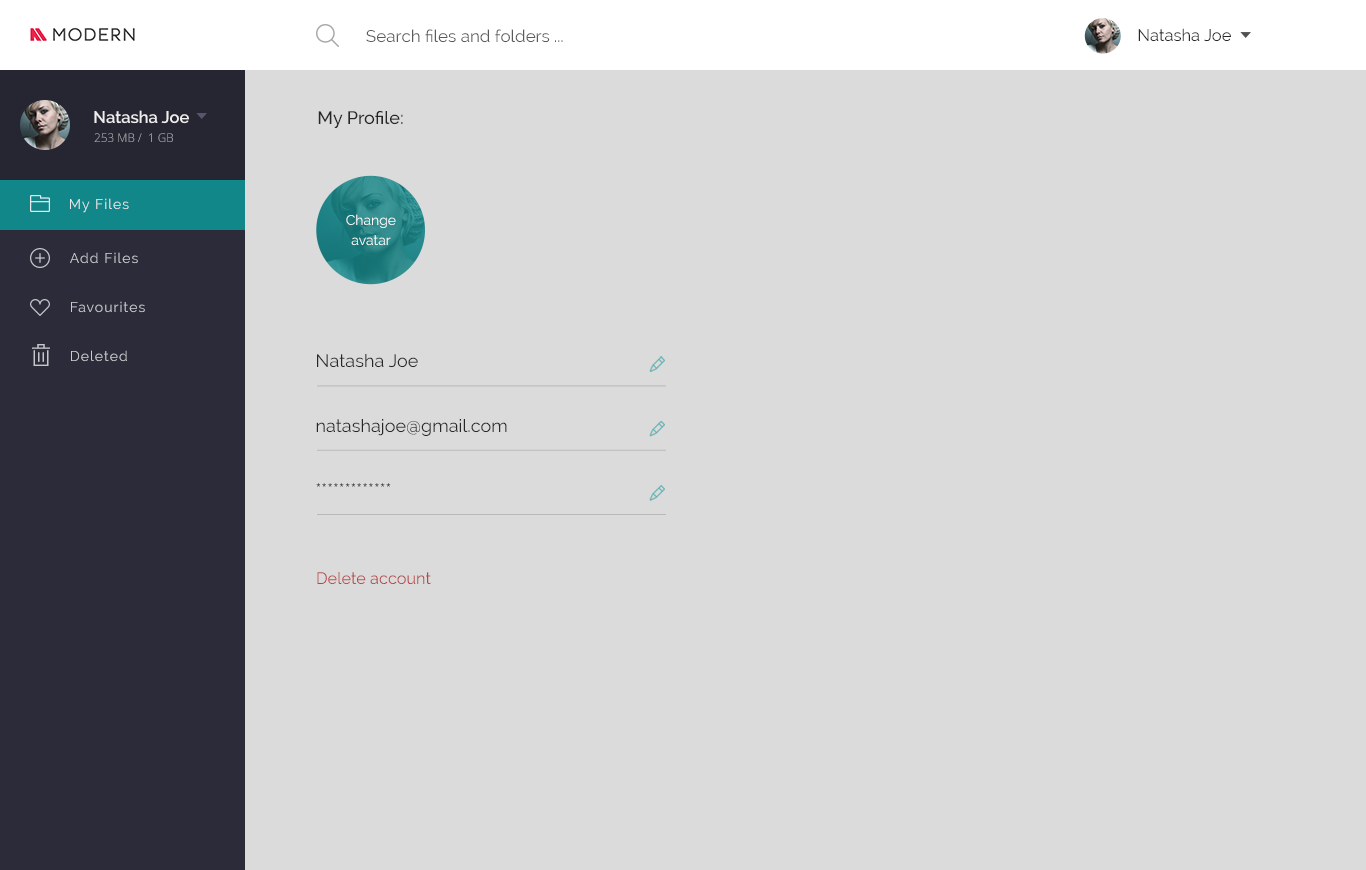
<style>
.page{position:relative;width:1366px;height:870px;background:#dbdbdb}
.page>*{position:absolute;margin:0}
.t1{font:16.9px "Raleway";color:#5a5a5a}
.t2{font:16.7px "Raleway";color:#272727}
.t3{font:16.7px "Raleway-SemiBold";color:#ffffff}
.t4{font:18px "Raleway-Medium";color:#272727}
.t5{font:11.9px "OpenSans-Light"}
.t6{font:14px "Raleway";letter-spacing:0.075em;color:#ffffff}
.t7{font:14px/20px "Raleway";color:#ffffff}
.t8{font:14px "Raleway";letter-spacing:0.075em;color:#cccccf}
.t9{font:18.1px "Raleway";color:#272727}
.t10{font:18.1px "Raleway"}
.t11{font:16.3px "Raleway";color:#b64545}
</style>
<div class="page">
<p class="t1" style="left:366px;top:29px;width:197px;height:14px">Search files and folders ...</p>
<p class="t2" style="left:1138px;top:28px;width:93px;height:14px">Natasha Joe</p>
<p class="t3" style="left:94px;top:110px;width:95px;height:14px;opacity:0.89">Natasha Joe</p>
<p class="t4" style="left:318px;top:110px;width:85px;height:18px">My Profile:</p>
<p class="t5" style="left:94px;top:133px;width:79px;height:9px">253 MB /  1 GB</p>
<p class="t6" style="left:70px;top:198px;width:59px;height:15px">My Files</p>
<p class="t7" style="left:346px;top:214px;width:50px;height:32px;text-align:center">Change<br>avatar</p>
<p class="t8" style="left:70px;top:252px;width:68px;height:12px">Add Files</p>
<p class="t8" style="left:71px;top:301px;width:74px;height:12px">Favourites</p>
<p class="t8" style="left:71px;top:350px;width:56px;height:12px">Deleted</p>
<p class="t9" style="left:317px;top:354px;width:101px;height:14px">Natasha Joe</p>
<p class="t9" style="left:316px;top:419px;width:191px;height:17px">natashajoe@gmail.com</p>
<p class="t10" style="left:316px;top:483px;width:75px;height:4px">*************</p>
<p class="t11" style="left:317px;top:572px;width:114px;height:13px">Delete account</p>
</div>
